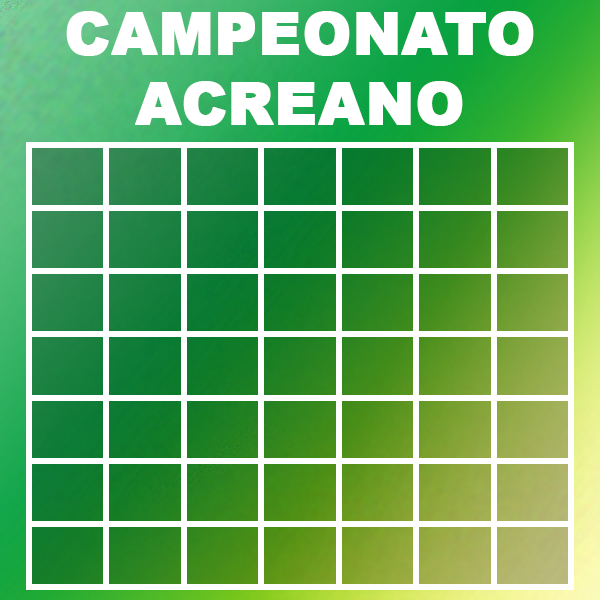
<style>
.page{position:relative;width:600px;height:600px}
.page>*{position:absolute;margin:0}
.t1{font:58.3px "Arial-Black";color:#ffffff;text-transform:uppercase;font-weight:bold}
</style>
<div class="page">
<p class="t1" style="left:66px;top:11px;width:468px;height:115px;text-align:justify">CAMPEONATO<br>acreano</p>
</div>
